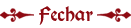
<style>
.page{position:relative;width:131px;height:28px;background:#ffffff}
.page>*{position:absolute;margin:0}
.t1{font:18px "Kelmscott-Regular";color:#8e0a12}
</style>
<div class="page">
<p class="t1" style="left:39px;top:6px;width:54px;height:19px">Fechar</p>
</div>
